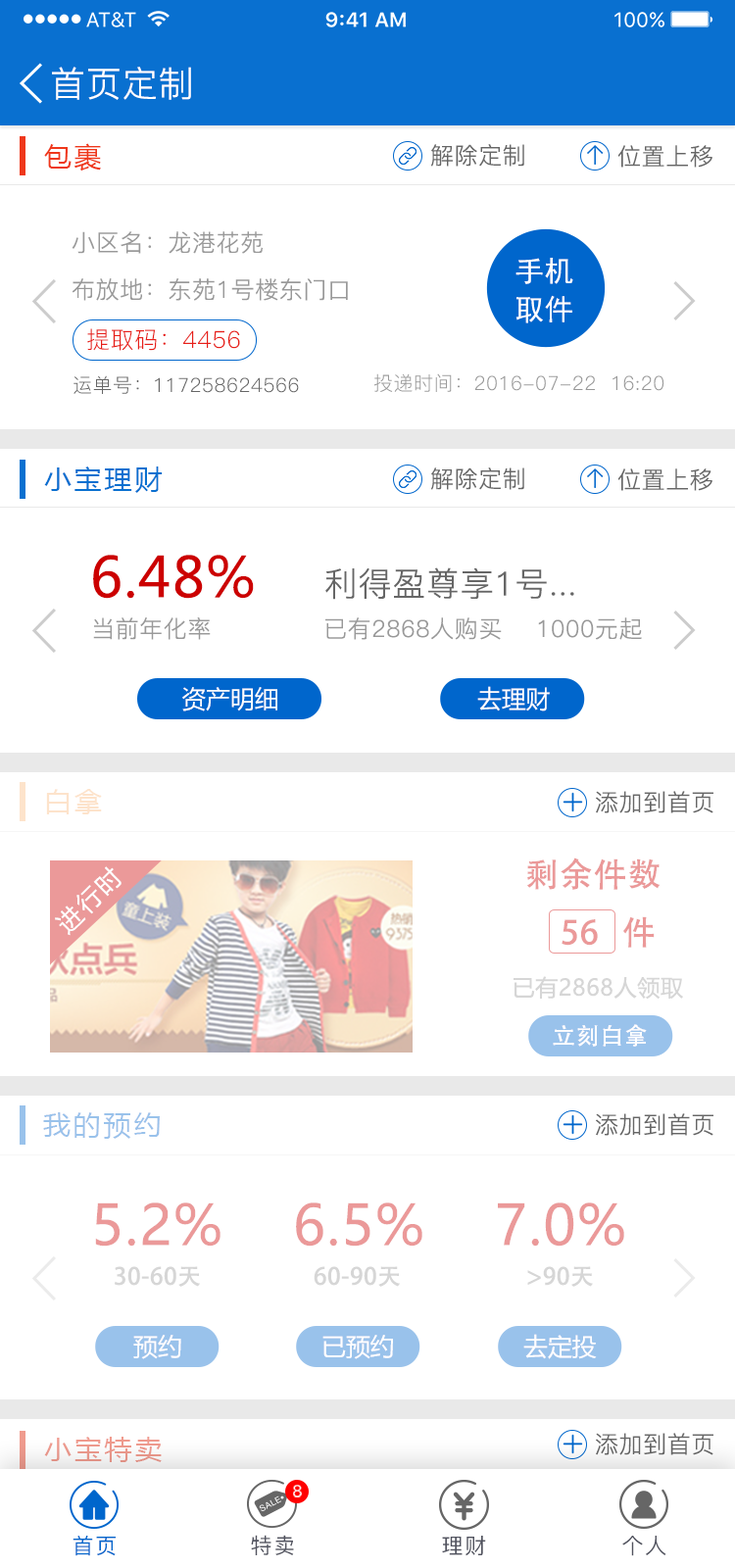
<style>
.page{position:relative;width:735px;height:1568px;background:#ffffff}
.page>*{position:absolute;margin:0}
.t1{font:35.3px "PingFang-SC-Regular";letter-spacing:0.025em;color:#ffffff}
.t2{font:27.4px "MicrosoftYaHei";letter-spacing:0.1em;color:#ef381b}
.t3{font:23.5px "PingFang-SC-Regular";letter-spacing:0.025em;color:#666666}
.t4{font:23.5px "PingFang-SC-Regular";letter-spacing:0.025em;color:#999999}
.t5{font:29.4px/38.3px "SimHei";letter-spacing:0.025em;color:#ffffff}
.t6{font:23.5px "PingFang-SC-Regular";letter-spacing:0.025em;color:#e71f19}
.t7{font:19.6px "PingFang-SC-Regular";letter-spacing:0.025em;color:#666666}
.t8{font:19.6px "PingFang-SC-Regular";letter-spacing:0.025em;color:#999999}
.t9{font:27.4px "MicrosoftYaHei";letter-spacing:0.1em;color:#0970d0}
.t10{font:54.9px "MicrosoftYaHei";letter-spacing:0.025em;color:#cc0000}
.t11{font:33.3px "PingFang-SC-Regular";letter-spacing:0.025em;color:#666666}
.t12{font:24.4px "MicrosoftYaHei";color:#ffffff}
.t13{font:27.4px "MicrosoftYaHei";letter-spacing:0.1em;color:#fde3cb}
.t14{font:33.3px "AdobeHeitiStd-Regular";letter-spacing:0.025em;color:#eb9999}
.t15{font:24.5px "MicrosoftYaHei";letter-spacing:0.1em;color:#ffffff}
.t16{font:32.7px "AdobeHeitiStd-Regular";letter-spacing:0.025em;color:#eb9999}
.t17{font:22.7px "MicrosoftYaHei";letter-spacing:0.025em;color:#d6d6d6}
.t18{font:23.5px "AdobeHeitiStd-Regular";letter-spacing:0.025em;color:#ffffff}
.t19{font:27.4px "MicrosoftYaHei";letter-spacing:0.1em;color:#99c2eb}
.t20{font:54.9px "MicrosoftYaHei";letter-spacing:0.025em;color:#eb9999}
.t21{font:23.5px "AdobeHeitiStd-Regular";letter-spacing:0.025em;color:#d6d6d6}
.t22{font:23.5px "PingFang-SC-Regular";letter-spacing:0.025em;color:#656565}
.t23{font:27.4px "MicrosoftYaHei";letter-spacing:0.1em;color:#eb988b}
.t24{font:16.7px "SFUIText-Regular";color:#ffffff}
.t25{font:21.6px "PingFang-SC-Medium";letter-spacing:0.075em;color:#0066cc}
.t26{font:21.6px "PingFang-SC-Medium";letter-spacing:0.075em;color:#51535f}
</style>
<div class="page">
<p class="t1" style="left:52px;top:67px;width:139px;height:33px">首页定制</p>
<p class="t2" style="left:44px;top:143px;width:57px;height:29px">包裹</p>
<p class="t3" style="left:431px;top:144px;width:93px;height:23px">解除定制</p>
<p class="t3" style="left:617px;top:145px;width:95px;height:23px">位置上移</p>
<p class="t4" style="left:72px;top:231px;width:191px;height:23px">小区名：龙港花苑</p>
<p class="t5" style="left:515px;top:258px;width:58px;height:65px">手机<br>取件</p>
<p class="t4" style="left:72px;top:278px;width:276px;height:23px">布放地：东苑1号楼东门口</p>
<p class="t6" style="left:87px;top:328px;width:153px;height:23px">提取码：4456</p>
<p class="t7" style="left:74px;top:375px;width:225px;height:19px">运单号：117258624566</p>
<p class="t8" style="left:373px;top:373px;width:291px;height:19px">投递时间：2016-07-22  16:20</p>
<p class="t9" style="left:44px;top:466px;width:119px;height:27px">小宝理财</p>
<p class="t3" style="left:431px;top:467px;width:93px;height:23px">解除定制</p>
<p class="t3" style="left:617px;top:468px;width:95px;height:23px">位置上移</p>
<p class="t10" style="left:93px;top:555px;width:161px;height:44px">6.48%</p>
<p class="t11" style="left:325px;top:567px;width:249px;height:33px">利得盈尊享1号...</p>
<p class="t4" style="left:93px;top:617px;width:118px;height:23px">当前年化率</p>
<p class="t4" style="left:325px;top:617px;width:177px;height:23px">已有2868人购买</p>
<p class="t4" style="left:538px;top:617px;width:104px;height:23px">1000元起</p>
<p class="t12" style="left:182px;top:687px;width:95px;height:24px">资产明细</p>
<p class="t12" style="left:477px;top:686px;width:73px;height:25px">去理财</p>
<p class="t13" style="left:46px;top:789px;width:56px;height:25px">白拿</p>
<p class="t3" style="left:596px;top:791px;width:117px;height:22px">添加到首页</p>
<p class="t14" style="left:527px;top:858px;width:134px;height:32px">剩余件数</p>
<p class="t15" style="left:55px;top:866px;width:67px;height:70px;rotate:-45deg">进行时</p>
<p class="t14" style="left:623px;top:916px;width:32px;height:32px">件</p>
<p class="t16" style="left:562px;top:919px;width:36px;height:27px">56</p>
<p class="t17" style="left:514px;top:976px;width:169px;height:24px">已有2868人领取</p>
<p class="t18" style="left:553px;top:1024px;width:94px;height:23px">立刻白拿</p>
<p class="t19" style="left:43px;top:1112px;width:117px;height:27px">我的预约</p>
<p class="t3" style="left:596px;top:1113px;width:117px;height:23px">添加到首页</p>
<p class="t20" style="left:95px;top:1202px;width:125px;height:45px">5.2%</p>
<p class="t20" style="left:296px;top:1202px;width:126px;height:45px">6.5%</p>
<p class="t20" style="left:498px;top:1202px;width:126px;height:45px">7.0%</p>
<p class="t21" style="left:115px;top:1266px;width:85px;height:21px">30-60天</p>
<p class="t21" style="left:314px;top:1266px;width:86px;height:21px">60-90天</p>
<p class="t21" style="left:527px;top:1266px;width:66px;height:21px">&gt;90天</p>
<p class="t12" style="left:133px;top:1335px;width:48px;height:24px">预约</p>
<p class="t12" style="left:322px;top:1335px;width:71px;height:24px">已预约</p>
<p class="t12" style="left:523px;top:1334px;width:74px;height:25px">去定投</p>
<p class="t22" style="left:596px;top:1433px;width:117px;height:22px">添加到首页</p>
<p class="t23" style="left:44px;top:1437px;width:118px;height:25px">小宝特卖</p>
<p class="t24" style="left:293px;top:1485px;width:9px;height:12px">8</p>
<p class="t25" style="left:73px;top:1536px;width:43px;height:20px">首页</p>
<p class="t26" style="left:251px;top:1535px;width:43px;height:20px">特卖</p>
<p class="t26" style="left:442px;top:1536px;width:44px;height:20px">理财</p>
<p class="t26" style="left:622px;top:1536px;width:44px;height:20px">个人</p>
</div>
